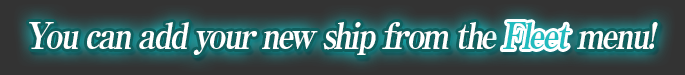
<style>
.page{position:relative;width:685px;height:75px;background:#333333}
.page>*{position:absolute;margin:0}
.t1{font:36px "RyuminPro-ExBold";letter-spacing:-0.08em;color:#ffffff;font-style:italic;scale:0.9 1}
.t2{font:36px "RyuminPro-ExBold";letter-spacing:-0.08em;color:#20bcbf;font-style:italic;scale:0.9 1}
</style>
<div class="page">
<p class="t1" style="left:29px;top:22px;width:629px;height:33px">You can add your new ship from the          menu!</p>
<p class="t2" style="left:502px;top:22px;width:68px;height:28px">Fleet</p>
</div>
